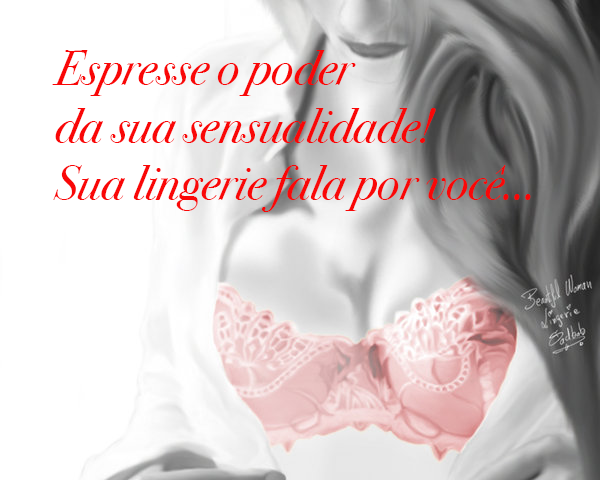
<style>
.page{position:relative;width:600px;height:480px;background:#ffffff}
.page>*{position:absolute;margin:0}
.t1{font:48px "BodoniSvtyTwoITCTT-BookIta";color:#f90707}
</style>
<div class="page">
<p class="t1" style="left:52px;top:50px;width:479px;height:162px">Espresse o poder <br>da sua sensualidade!<br>Sua lingerie fala por você...</p>
</div>
